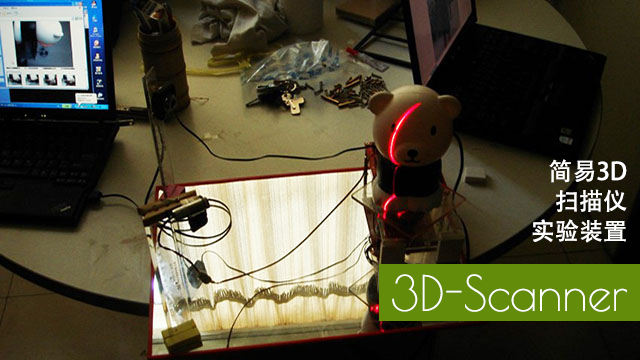
<style>
.page{position:relative;width:640px;height:360px}
.page>*{position:absolute;margin:0}
.t1{font:24px/30px "AdobeHeitiStd-Regular";color:#ffffff}
.t2{font:48px "PoiretOne-Regular";color:#ffffff}
</style>
<div class="page">
<p class="t1" style="left:532px;top:159px;width:95px;height:84px;text-align:right">简易3D<br>扫描仪<br>实验装置</p>
<p class="t2" style="left:392px;top:274px;width:235px;height:38px">3D-Scanner</p>
</div>
